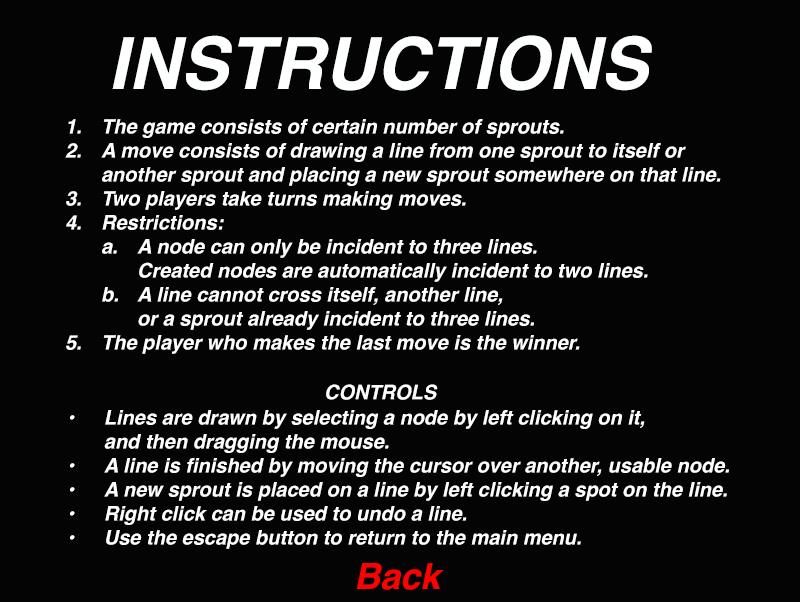
<style>
.page{position:relative;width:800px;height:602px;background:#050404}
.page>*{position:absolute;margin:0}
.t1{font:72px "Helvetica-BoldOblique";color:#feffff}
.t2{font:20px "Helvetica-BoldOblique";color:#feffff}
.t3{font:36px "Helvetica-BoldOblique";color:#fc0101}
</style>
<div class="page">
<p class="t1" style="left:112px;top:35px;width:540px;height:56px">INSTRUCTIONS</p>
<p class="t2" style="left:65px;top:119px;width:656px;height:235px">1. The game consists of certain number of sprouts.<br>2. A move consists of drawing a line from one sprout to itself or <br> another sprout and placing a new sprout somewhere on that line. <br>3. Two players take turns making moves.<br>4. Restrictions:<br> a. A node can only be incident to three lines. <br>  Created nodes are automatically incident to two lines.<br> b. A line cannot cross itself, another line, <br>  or a sprout already incident to three lines.<br>5. The player who makes the last move is the winner.</p>
<p class="t2" style="left:326px;top:384px;width:112px;height:16px">CONTROLS</p>
<p class="t2" style="left:70px;top:410px;width:659px;height:139px">• Lines are drawn by selecting a node by left clicking on it, <br> and then dragging the mouse.<br>• A line is finished by moving the cursor over another, usable node.<br>• A new sprout is placed on a line by left clicking a spot on the line.<br>• Right click can be used to undo a line.<br>• Use the escape button to return to the main menu.</p>
<p class="t3" style="left:356px;top:563px;width:88px;height:27px">Back</p>
</div>
